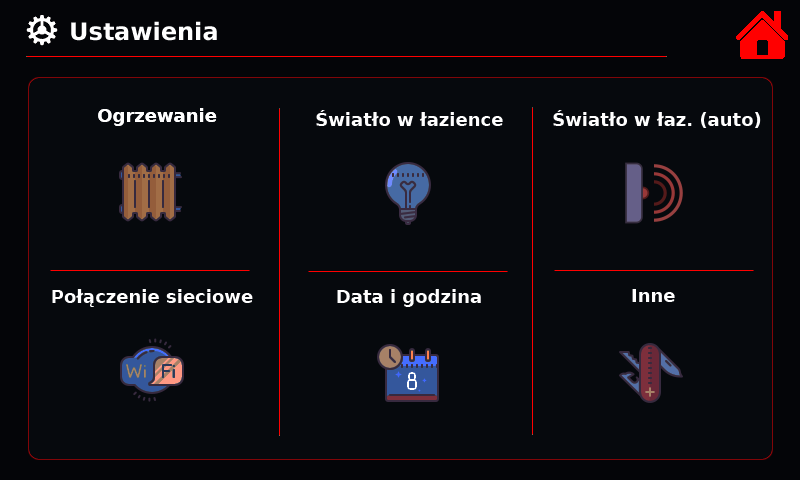
<style>
.page{position:relative;width:800px;height:480px;background:#06090d}
.page>*{position:absolute;margin:0}
.t1{font:24px "DejaVuSans-Bold";color:#ffffff}
.t2{font:18px "DejaVuSans-Bold";color:#ffffff}
</style>
<div class="page">
<p class="t1" style="left:71px;top:21px;width:146px;height:20px">Ustawienia</p>
<p class="t2" style="left:98px;top:108px;width:119px;height:18px">Ogrzewanie</p>
<p class="t2" style="left:98px;top:108px;width:119px;height:18px">Ogrzewanie</p>
<p class="t2" style="left:316px;top:110px;width:187px;height:16px">Światło w łazience</p>
<p class="t2" style="left:553px;top:110px;width:208px;height:18px">Światło w łaz. (auto)</p>
<p class="t2" style="left:52px;top:289px;width:201px;height:18px">Połączenie sieciowe</p>
<p class="t2" style="left:337px;top:289px;width:144px;height:18px">Data i godzina</p>
<p class="t2" style="left:632px;top:289px;width:43px;height:13px">Inne</p>
</div>
